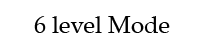
<style>
.page{position:relative;width:200px;height:50px;background:#ffffff}
.page>*{position:absolute;margin:0}
.t1{font:24px "PalatinoLinotype-Roman";color:#000000}
</style>
<div class="page">
<p class="t1" style="left:34px;top:16px;width:136px;height:17px">6 level Mode</p>
</div>
